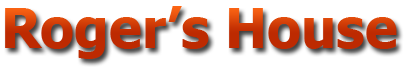
<style>
.page{position:relative;width:405px;height:70px;background:#ffffff}
.page>*{position:absolute;margin:0}
.t1{font:55px "Tahoma-Bold";color:#bd2a01}
</style>
<div class="page">
<p class="t1" style="left:5px;top:6px;width:392px;height:53px">Roger’s House</p>
</div>
